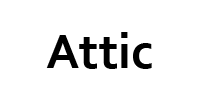
<style>
.page{position:relative;width:197px;height:100px;background:#ffffff}
.page>*{position:absolute;margin:0}
.t1{font:50.8px "Corbel-Bold";color:#000000}
</style>
<div class="page">
<p class="t1" style="left:46px;top:32px;width:106px;height:37px">Attic</p>
</div>
